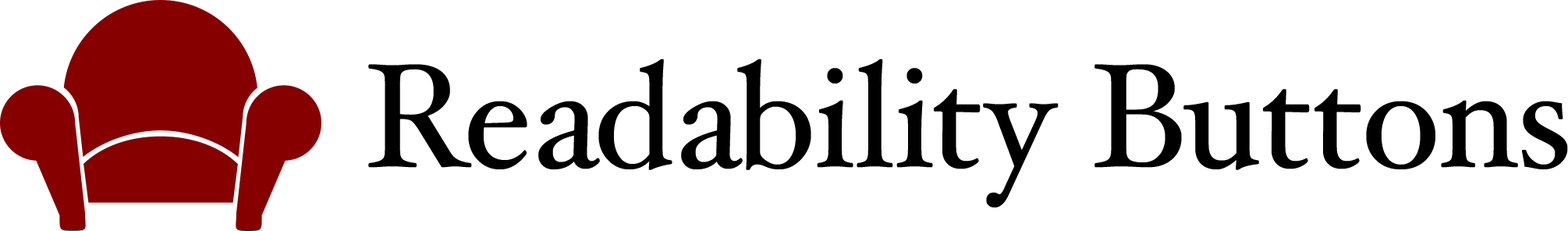
<style>
.page{position:relative;width:1568px;height:231px;background:#ffffff}
.page>*{position:absolute;margin:0}
.t1{font:147.6px "HoeflerText-Regular";color:#000000}
</style>
<div class="page">
<p class="t1" style="left:368px;top:59px;width:1200px;height:149px">Readability Buttons</p>
</div>
